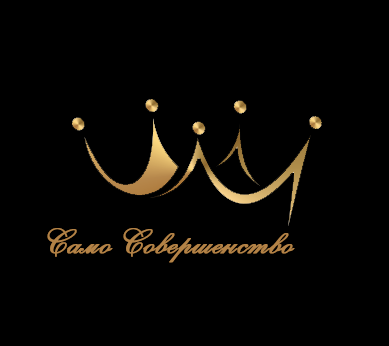
<style>
.page{position:relative;width:389px;height:346px;background:#000000}
.page>*{position:absolute;margin:0}
.t1{font:34px "AnastasiaScriptC";color:#b38246;font-weight:bold;font-style:italic}
</style>
<div class="page">
<p class="t1" style="left:47px;top:228px;width:248px;height:35px">Само Совершенство</p>
</div>
